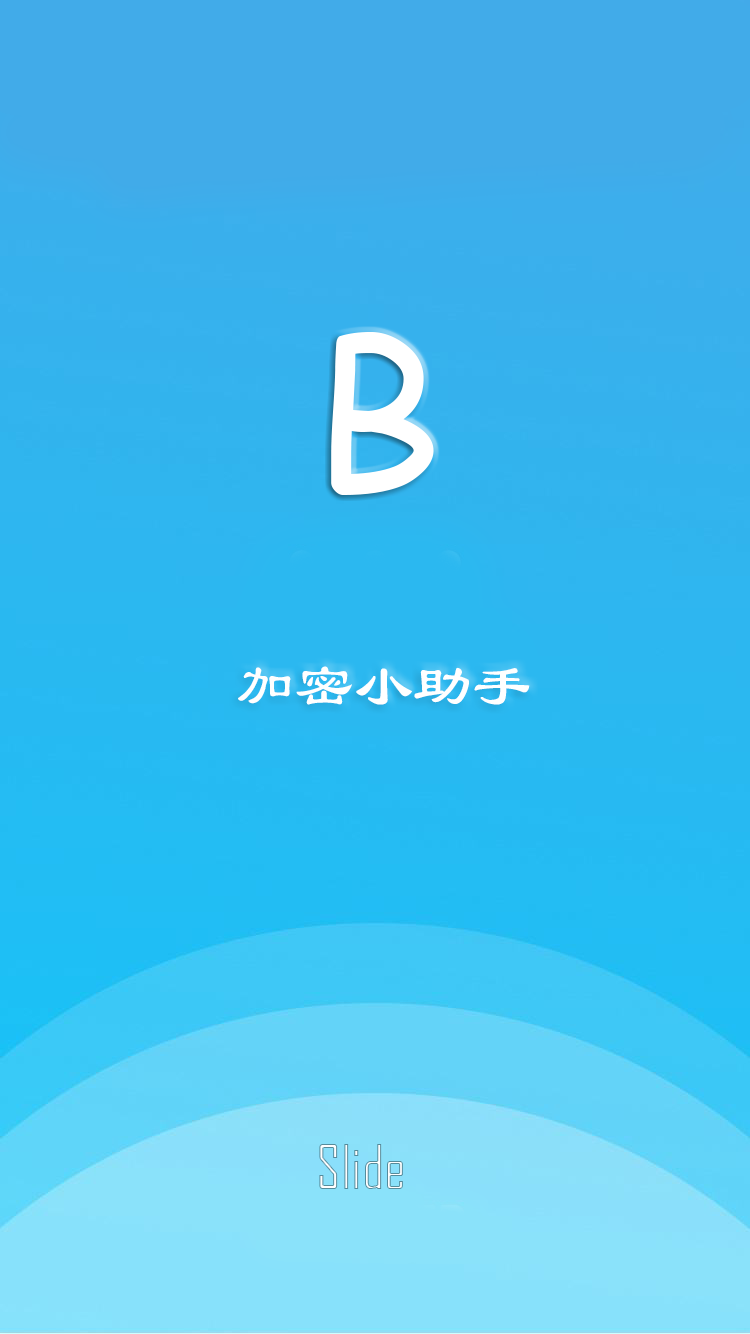
<style>
.page{position:relative;width:750px;height:1334px}
.page>*{position:absolute;margin:0}
.t1{font:59px "LiSu";color:#ffffff}
.t2{font:59px "AgencyFB-Reg"}
</style>
<div class="page">
<p class="t1" style="left:238px;top:666px;width:292px;height:39px">加密小助手</p>
<p class="t2" style="left:319px;top:1144px;width:84px;height:45px">Slide</p>
</div>
